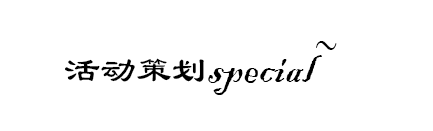
<style>
.page{position:relative;width:433px;height:131px;background:#ffffff}
.page>*{position:absolute;margin:0}
.t1{font:48px "BlackadderITC-Regular";color:#000000}
.t2{font:36px "LiSu";color:#000000}
.t3{font:48px "LiSu";color:#000000}
</style>
<div class="page">
<p class="t1" style="left:65px;top:41px;width:272px;height:54px"><span class="t2">活动策划</span>special<span class="t3">~</span></p>
</div>
